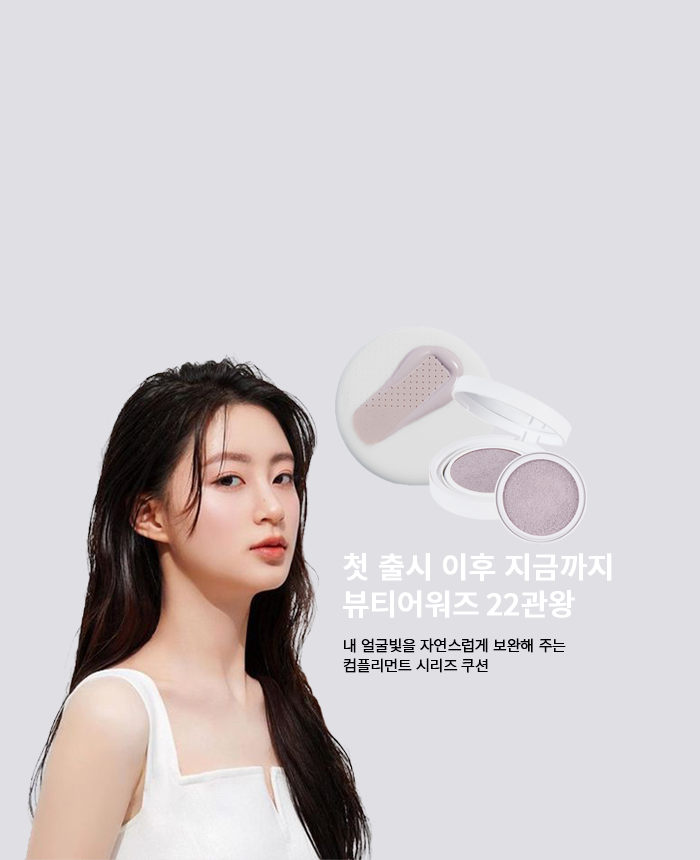
<style>
.page{position:relative;width:700px;height:860px;background:#e0dfe4}
.page>*{position:absolute;margin:0}
.t1{font:30px/37px "NotoSansKR-Medium";letter-spacing:-0.03em;color:#ffffff;font-weight:bold}
.t2{font:15px/20px "NotoSansKR-Light";letter-spacing:-0.03em;color:#000000;font-weight:bold}
</style>
<div class="page">
<p class="t1" style="left:343px;top:553px;width:269px;height:65px">첫 출시 이후 지금까지<br>뷰티어워즈 22관왕</p>
<p class="t2" style="left:343px;top:638px;width:223px;height:35px">내 얼굴빛을 자연스럽게 보완해 주는<br>컴플리먼트 시리즈 쿠션</p>
</div>
